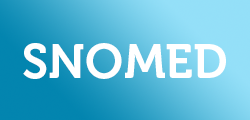
<style>
.page{position:relative;width:250px;height:120px}
.page>*{position:absolute;margin:0}
.t1{font:48px "Museo-700";color:#ffffff}
</style>
<div class="page">
<p class="t1" style="left:23px;top:43px;width:203px;height:36px">SNOMED</p>
</div>
